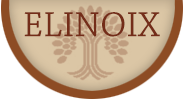
<style>
.page{position:relative;width:185px;height:105px;background:#ffffff}
.page>*{position:absolute;margin:0}
.t1{font:36.8px "ChaparralPro-Regular";color:#742d19}
</style>
<div class="page">
<p class="t1" style="left:24px;top:12px;width:136px;height:25px">ELINOIX</p>
</div>
